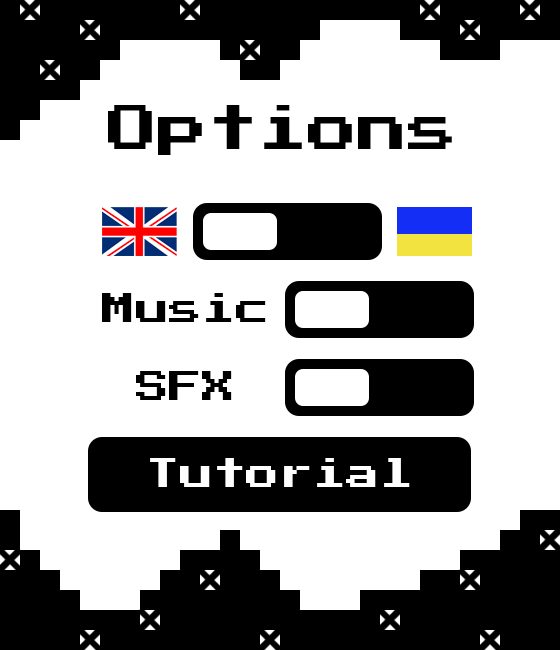
<style>
.page{position:relative;width:560px;height:650px;background:#ffffff}
.page>*{position:absolute;margin:0}
.t1{font:50px "PressStart2P-Regular";color:#000000}
.t2{font:33.3px "PressStart2P-Regular";color:#000000}
.t3{font:33.3px "PressStart2P-Regular";color:#fefefe}
</style>
<div class="page">
<p class="t1" style="left:108px;top:105px;width:344px;height:50px">Options</p>
<p class="t2" style="left:102px;top:293px;width:164px;height:29px">Music</p>
<p class="t2" style="left:136px;top:371px;width:96px;height:29px">SFX</p>
<p class="t3" style="left:150px;top:458px;width:260px;height:29px">Tutorial</p>
</div>
